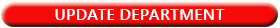
<style>
.page{position:relative;width:280px;height:28px;background:#f60b0b}
.page>*{position:absolute;margin:0}
.t1{font:16.4px "YuGothicUI-Bold";color:#ffffff}
</style>
<div class="page">
<p class="t1" style="left:55px;top:9px;width:170px;height:11px">UPDATE DEPARTMENT</p>
</div>
